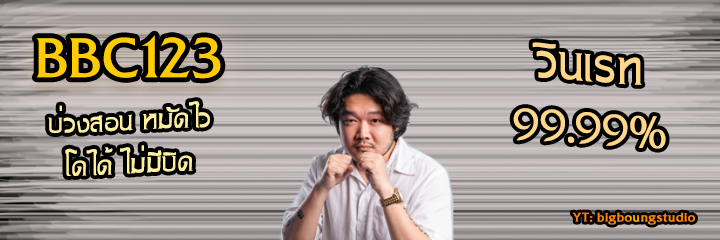
<style>
.page{position:relative;width:720px;height:240px}
.page>*{position:absolute;margin:0}
.t1{font:81.9px "DSNPaNuTat";color:#ffcc00}
.t2{font:64px/63px "DSNPaNuTat";color:#ffd789}
.t3{font:36px "DSNPaNuTat";color:#fff09e}
.t4{font:18px "DSNPaNuTat";color:#ff8505;font-weight:bold}
</style>
<div class="page">
<p class="t1" style="left:36px;top:35px;width:185px;height:44px">BBC123</p>
<p class="t2" style="left:513px;top:42px;width:153px;height:107px;text-align:center">วินเรท<br>99.99%</p>
<p class="t3" style="left:48px;top:101px;width:162px;height:75px;text-align:center">บ่วงสอน หมัดไว<br>โดได้ ไม่มีบิด</p>
<p class="t4" style="left:572px;top:212px;width:123px;height:13px">YT: bigboungstudio</p>
</div>
